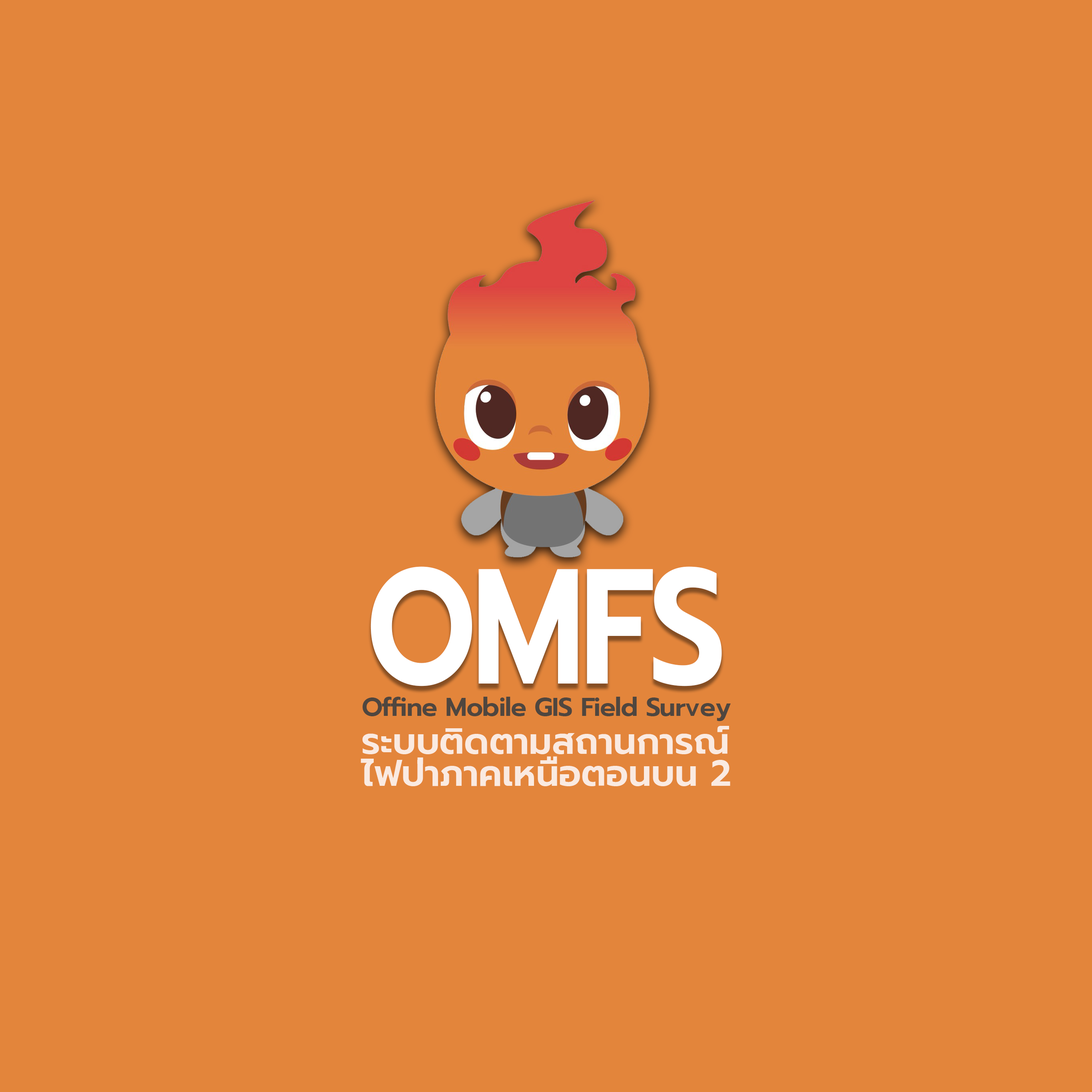
<style>
.page{position:relative;width:1092px;height:1092px;background:#e3853b}
.page>*{position:absolute;margin:0}
.t1{font:163.6px "Prompt-SemiBold";letter-spacing:-0.035em;color:#ffffff;scale:0.83 1}
.t2{font:26px "Prompt-SemiBold";letter-spacing:-0.025em;color:#4f463f}
.t3{font:36px/32px "Prompt-SemiBold";color:#faeae1}
</style>
<div class="page">
<p class="t1" style="left:371px;top:566px;width:351px;height:120px">OMFS</p>
<p class="t2" style="left:363px;top:697px;width:368px;height:24px">Offine Mobile GIS Field Survey</p>
<p class="t3" style="left:361px;top:726px;width:369px;height:60px">ระบบติดตามสถานการณ์<br>ไฟป่าภาคเหนือตอนบน 2</p>
</div>
